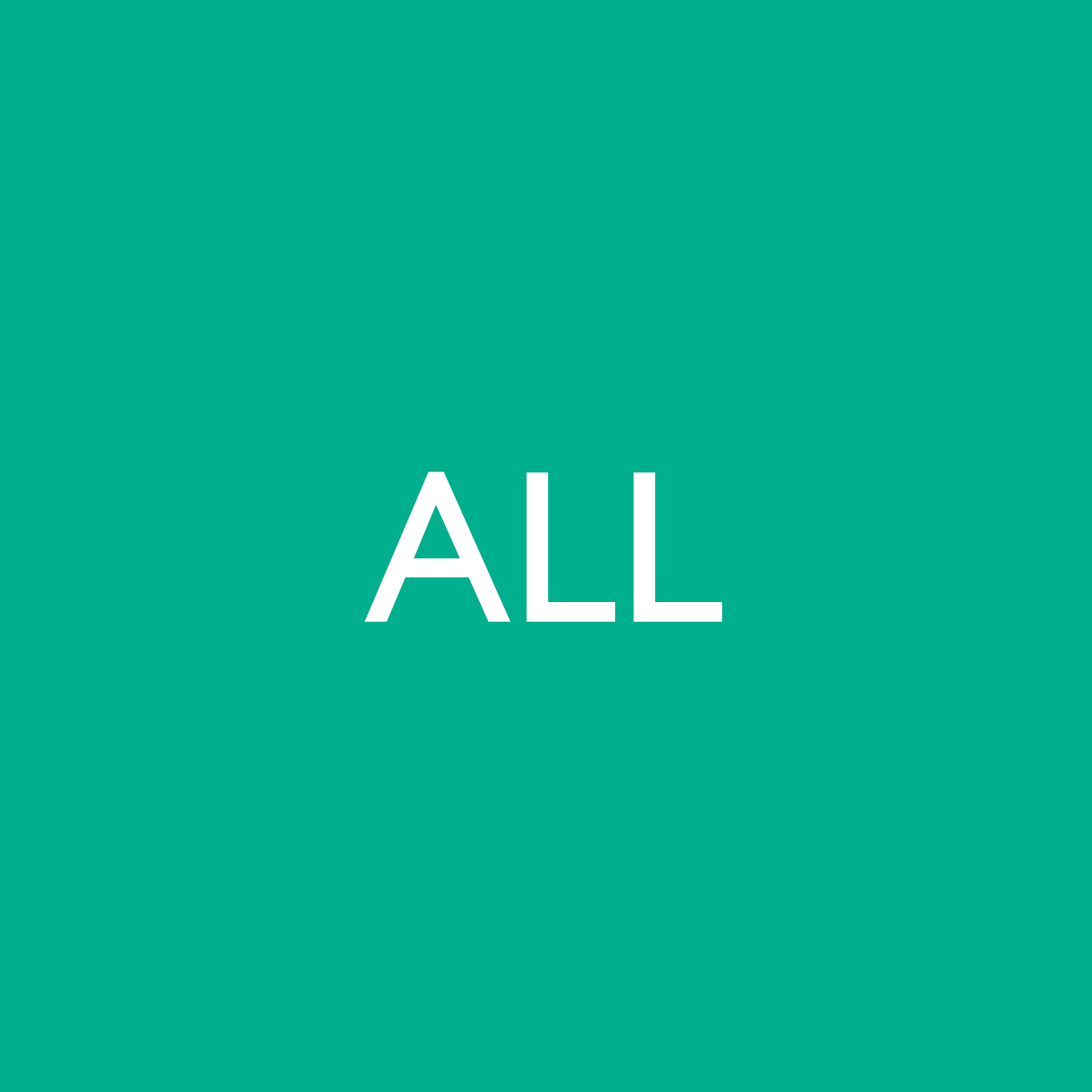
<style>
.page{position:relative;width:1092px;height:1092px;background:#00af8e}
.page>*{position:absolute;margin:0}
.t1{font:218.4px "GillSansMT";color:#ffffff}
</style>
<div class="page">
<p class="t1" style="left:365px;top:472px;width:357px;height:150px">ALL</p>
</div>
